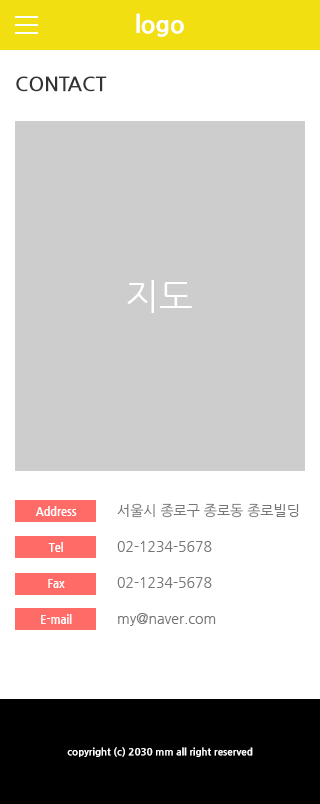
<style>
.page{position:relative;width:320px;height:804px;background:#ffffff}
.page>*{position:absolute;margin:0}
.t1{font:24px "NanumGothicExtraBold";color:#ffffff}
.t2{font:20px "NanumGothicBold";color:#333333;text-transform:uppercase}
.t3{font:36px "NanumGothic";color:#ffffff}
.t4{font:14px/18px "NanumGothic";color:#767676}
.t5{font:10px "NanumGothicExtraBold";color:#ffffff}
</style>
<div class="page">
<p class="t1" style="left:136px;top:13px;width:48px;height:24px">logo</p>
<p class="t2" style="left:16px;top:76px;width:91px;height:16px">contact</p>
<p class="t3" style="left:127px;top:280px;width:65px;height:33px">지도</p>
<p class="t4" style="left:117px;top:503px;width:182px;height:123px">서울시 종로구 종로동 종로빌딩<br><br>02-1234-5678<br><br>02-1234-5678<br><br>my@naver.com</p>
<p class="t5" style="left:67px;top:747px;width:186px;height:10px">copyright (c) 2030 mm all right reserved</p>
</div>
